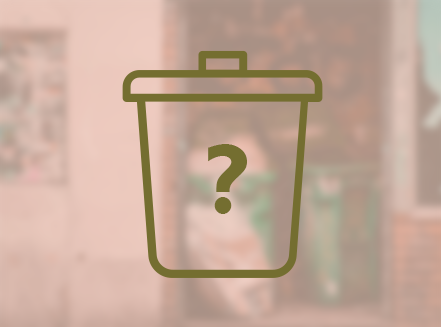
<style>
.page{position:relative;width:441px;height:327px}
.page>*{position:absolute;margin:0}
.t1{font:100px "AbadiMT-CondensedExtraBold";color:#746e30}
</style>
<div class="page">
<p class="t1" style="left:208px;top:144px;width:39px;height:70px">?</p>
</div>
